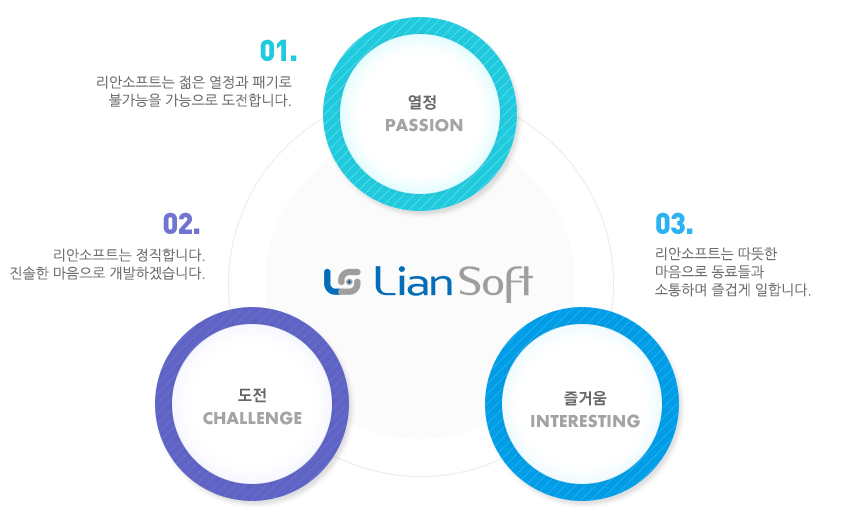
<style>
.page{position:relative;width:860px;height:517px;background:#ffffff}
.page>*{position:absolute;margin:0}
.t1{font:14px/18px "NanumGothic";color:#6f6f6f}
</style>
<div class="page">
<p class="t1" style="left:97px;top:75px;width:195px;height:32px;text-align:right">리안소프트는 젊은 열정과 패기로<br>불가능을 가능으로 도전합니다.</p>
<p class="t1" style="left:10px;top:248px;width:195px;height:32px;text-align:right">리안소프트는 정직합니다.<br>진솔한 마음으로 개발하겠습니다.</p>
<p class="t1" style="left:655px;top:247px;width:156px;height:50px">리안소프트는 따뜻한 <br>마음으로 동료들과<br>소통하며 즐겁게 일합니다.</p>
</div>
